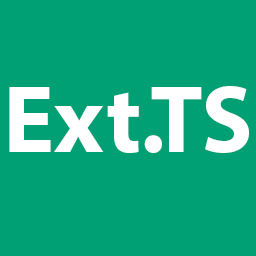
<style>
.page{position:relative;width:256px;height:256px;background:#009f74}
.page>*{position:absolute;margin:0}
.t1{font:96px "MyriadPro-Bold";color:#ffffff}
.t2{font:96px "MyriadPro-Bold";letter-spacing:-0.16em;color:#ffffff}
</style>
<div class="page">
<p class="t1" style="left:9px;top:86px;width:240px;height:67px">Ext<span class="t2">.</span>TS</p>
</div>
